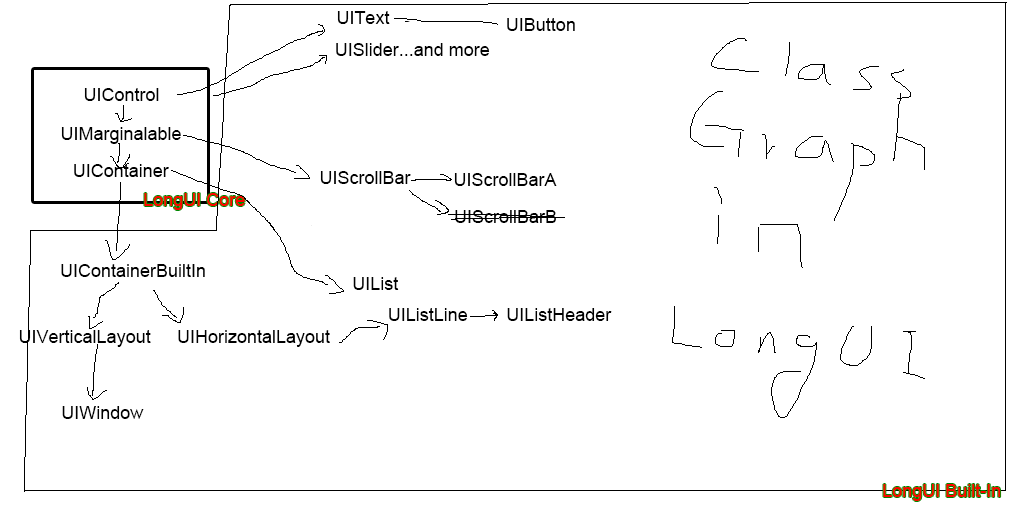
<style>
.page{position:relative;width:1024px;height:512px;background:#ffffff}
.page>*{position:absolute;margin:0}
.t1{font:18px "ArialMT";color:#000000}
.t2{font:18px "ArialMT";color:#010101}
.t3{font:18px "ArialMT";color:#ff0000}
</style>
<div class="page">
<p class="t1" style="left:337px;top:11px;width:53px;height:13px">UIText</p>
<p class="t1" style="left:507px;top:18px;width:68px;height:13px">UIButton</p>
<p class="t2" style="left:336px;top:43px;width:154px;height:13px">UISlider...and more</p>
<p class="t1" style="left:84px;top:88px;width:75px;height:13px">UIControl</p>
<p class="t1" style="left:61px;top:127px;width:120px;height:17px">UIMarginalable</p>
<p class="t1" style="left:74px;top:164px;width:95px;height:13px">UIContainer</p>
<p class="t1" style="left:320px;top:171px;width:91px;height:13px">UIScrollBar</p>
<p class="t1" style="left:454px;top:173px;width:103px;height:13px">UIScrollBarA</p>
<p class="t3" style="left:144px;top:193px;width:101px;height:17px">LongUI Core</p>
<p class="t1" style="left:455px;top:210px;width:101px;height:13px">UIScrollBarB</p>
<p class="t1" style="left:61px;top:264px;width:144px;height:13px">UIContainerBuiltIn</p>
<p class="t1" style="left:353px;top:277px;width:46px;height:13px">UIList</p>
<p class="t1" style="left:389px;top:308px;width:79px;height:13px">UIListLine</p>
<p class="t1" style="left:507px;top:308px;width:105px;height:13px">UIListHeader</p>
<p class="t1" style="left:19px;top:330px;width:132px;height:17px">UIVerticalLayout</p>
<p class="t1" style="left:178px;top:330px;width:152px;height:17px">UIHorizontalLayout</p>
<p class="t1" style="left:62px;top:406px;width:82px;height:13px">UIWindow</p>
<p class="t3" style="left:883px;top:484px;width:118px;height:17px">LongUI Built-In</p>
</div>
